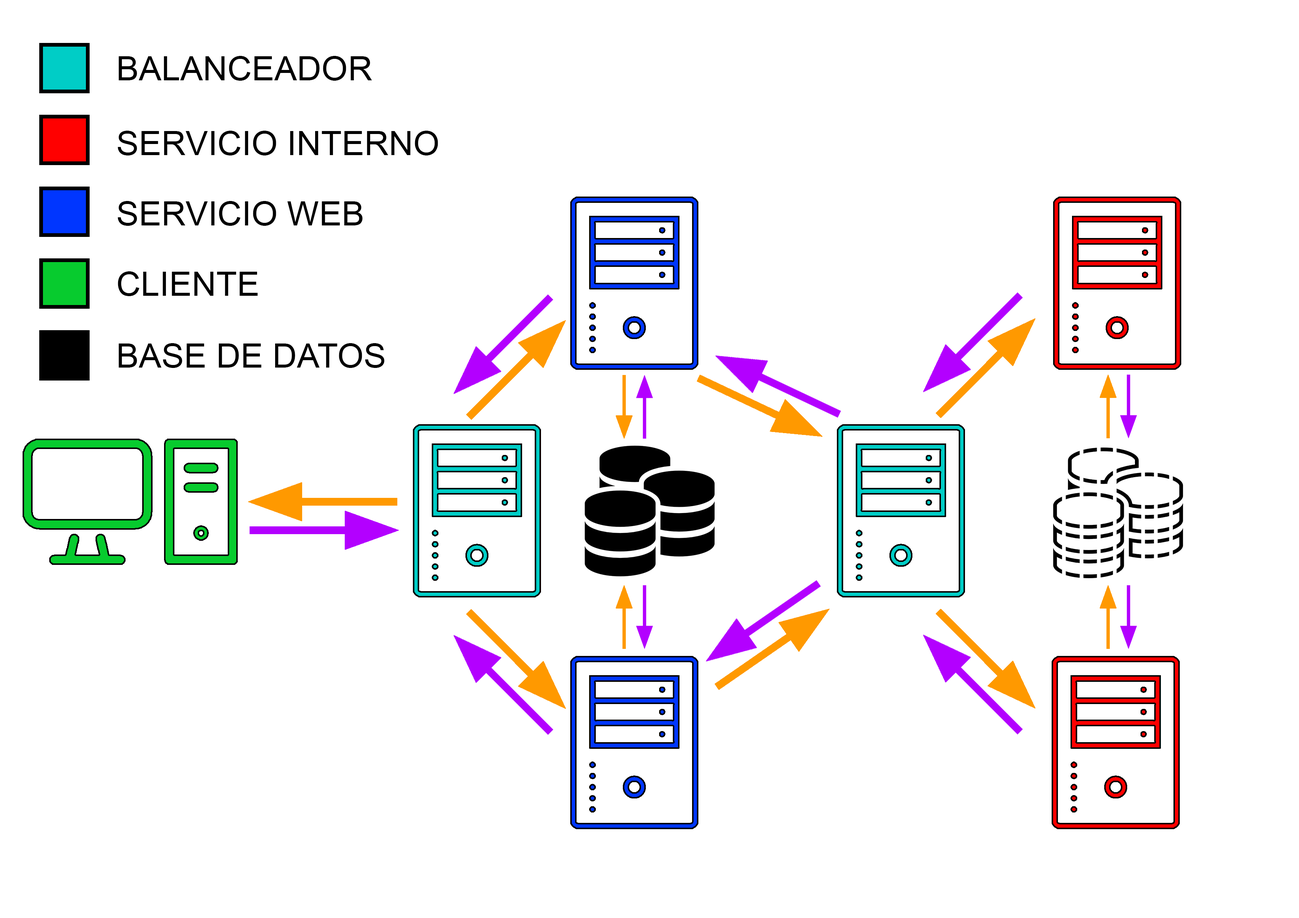
<style>
.page{position:relative;width:1299px;height:918px;background:#ffffff}
.page>*{position:absolute;margin:0}
.t1{font:33.9px "ArialMT";color:#000000}
</style>
<div class="page">
<p class="t1" style="left:118px;top:56px;width:254px;height:25px">BALANCEADOR</p>
<p class="t1" style="left:118px;top:131px;width:320px;height:24px">SERVICIO INTERNO</p>
<p class="t1" style="left:118px;top:201px;width:244px;height:25px">SERVICIO WEB</p>
<p class="t1" style="left:118px;top:271px;width:140px;height:25px">CLIENTE</p>
<p class="t1" style="left:118px;top:343px;width:266px;height:25px">BASE DE DATOS</p>
</div>
